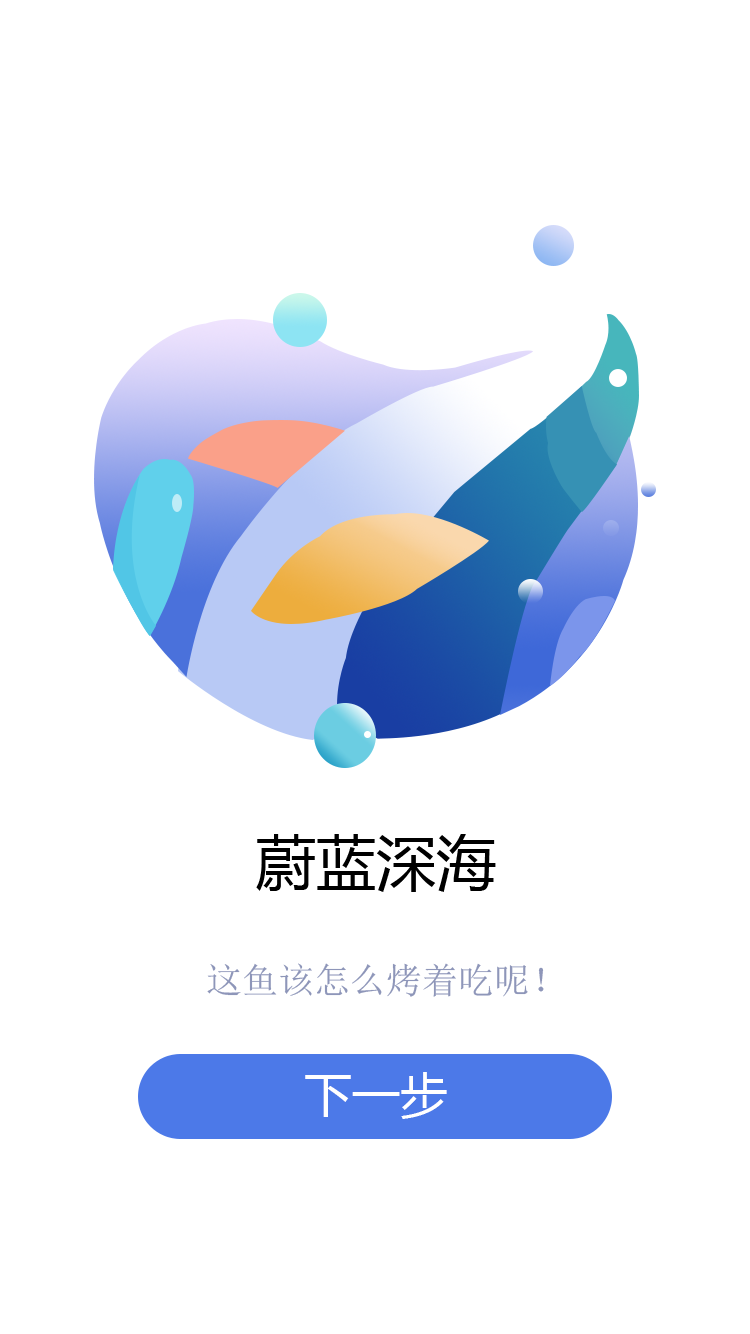
<style>
.page{position:relative;width:750px;height:1334px;background:#ffffff}
.page>*{position:absolute;margin:0}
.t1{font:60px "MicrosoftYaHei";color:#000000}
.t2{font:36px "SimSun";color:#8e96b9}
.t3{font:48px "MicrosoftYaHei";color:#ffffff}
</style>
<div class="page">
<p class="t1" style="left:256px;top:834px;width:240px;height:58px">蔚蓝深海</p>
<p class="t2" style="left:207px;top:963px;width:337px;height:34px">这鱼该怎么烤着吃呢！</p>
<p class="t3" style="left:305px;top:1072px;width:142px;height:47px">下一步</p>
</div>
